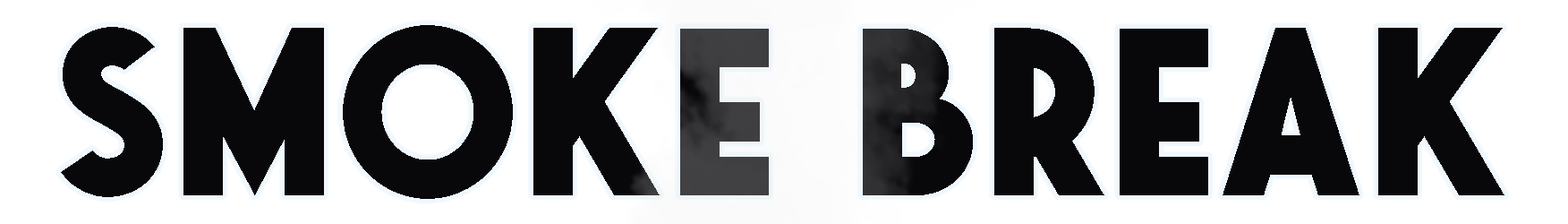
<style>
.page{position:relative;width:1568px;height:224px;background:#ffffff}
.page>*{position:absolute;margin:0}
.t1{font:238.7px "SaveurSans-Bold";color:#08080b}
</style>
<div class="page">
<p class="t1" style="left:61px;top:25px;width:1443px;height:174px">SMOKE BREAK</p>
</div>
